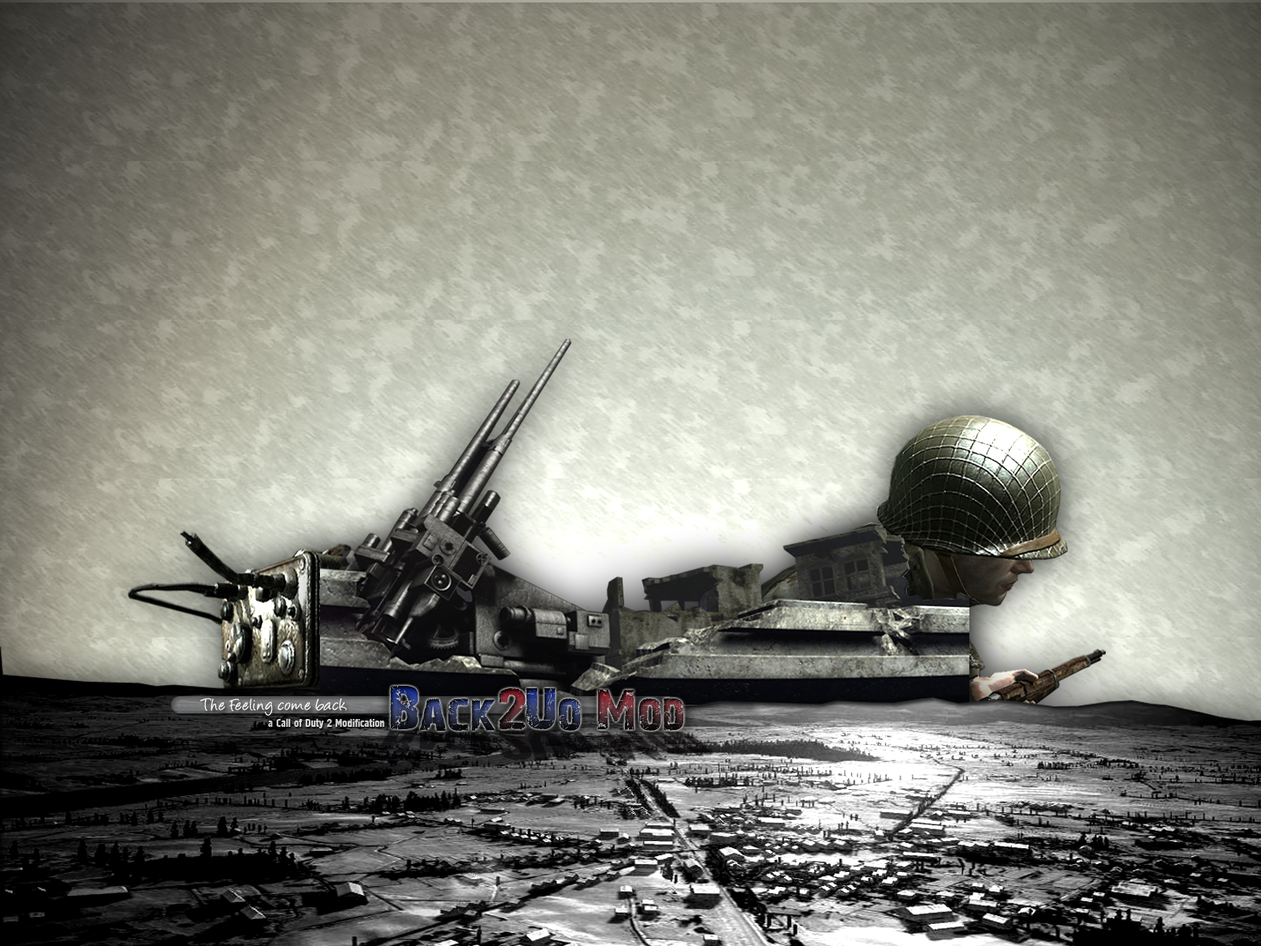
<style>
.page{position:relative;width:1261px;height:946px}
.page>*{position:absolute;margin:0}
.t1{font:18.9px "Angelina";color:#ffffff;scale:1.07 1}
.t2{font:11px "ft57-Normal";color:#d3d3d3}
</style>
<div class="page">
<p class="t1" style="left:200px;top:697px;width:147px;height:19px">The Feeling come back</p>
<p class="t2" style="left:268px;top:718px;width:117px;height:10px">a Call of Duty 2 Modification</p>
</div>
